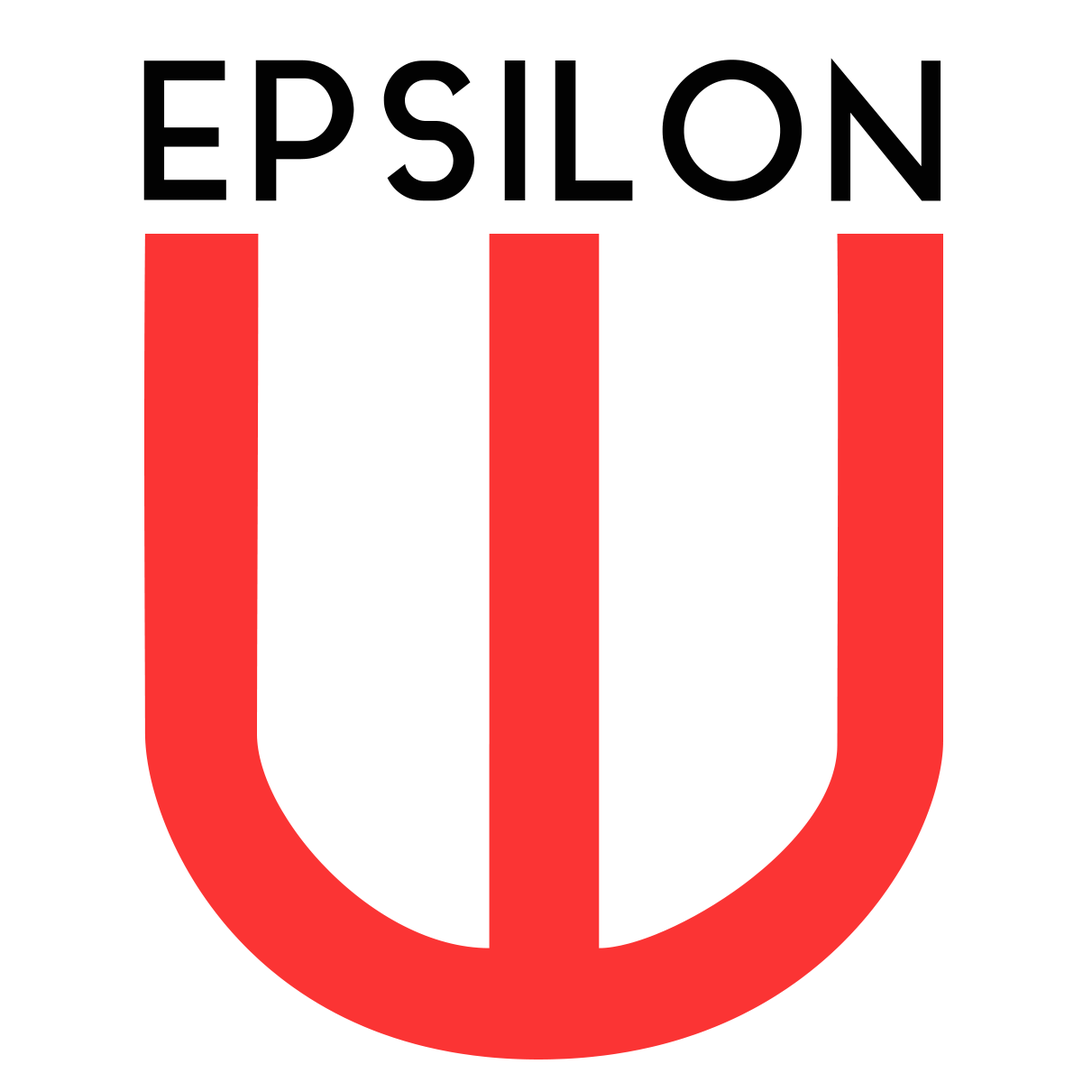
<style>
.page{position:relative;width:1092px;height:1092px;background:#ffffff}
.page>*{position:absolute;margin:0}
.t1{font:190.8px "AquaGrotesque";color:#020202}
</style>
<div class="page">
<p class="t1" style="left:143px;top:58px;width:799px;height:143px">EPSILON</p>
</div>
